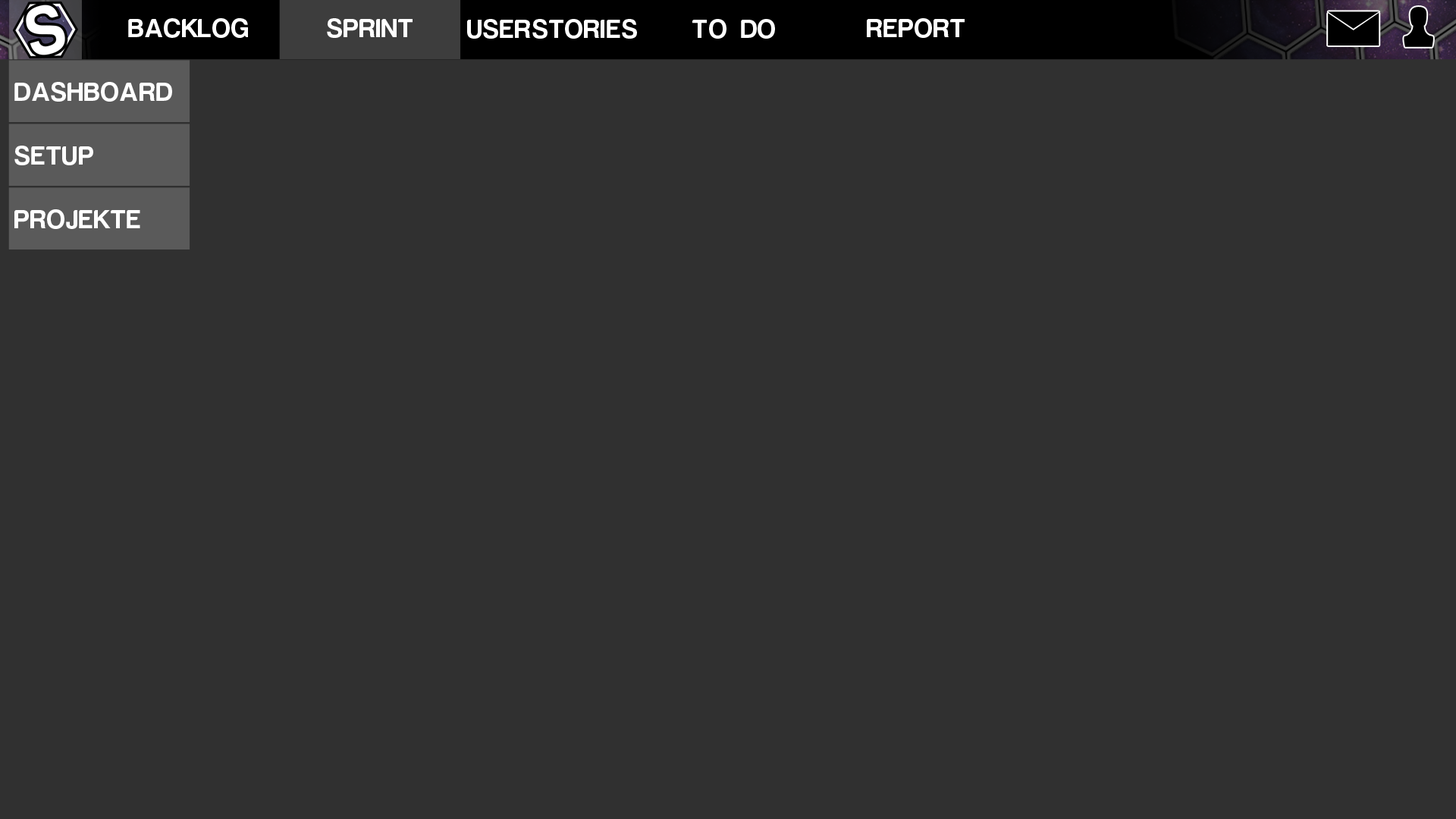
<style>
.page{position:relative;width:1456px;height:819px;background:#303030}
.page>*{position:absolute;margin:0}
.t1{font:26.8px "HarabaraMaisBold-HarabaraMaisBold";color:#ffffff;text-transform:uppercase}
</style>
<div class="page">
<p class="t1" style="left:128px;top:18px;width:120px;height:20px">Backlog</p>
<p class="t1" style="left:327px;top:18px;width:86px;height:20px">Sprint</p>
<p class="t1" style="left:467px;top:19px;width:170px;height:20px">UserStories</p>
<p class="t1" style="left:692px;top:19px;width:83px;height:20px">To do</p>
<p class="t1" style="left:867px;top:18px;width:98px;height:20px">Report</p>
<p class="t1" style="left:14px;top:82px;width:158px;height:20px">Dashboard</p>
<p class="t1" style="left:14px;top:146px;width:79px;height:19px">Setup</p>
<p class="t1" style="left:14px;top:209px;width:126px;height:20px">Projekte</p>
</div>
